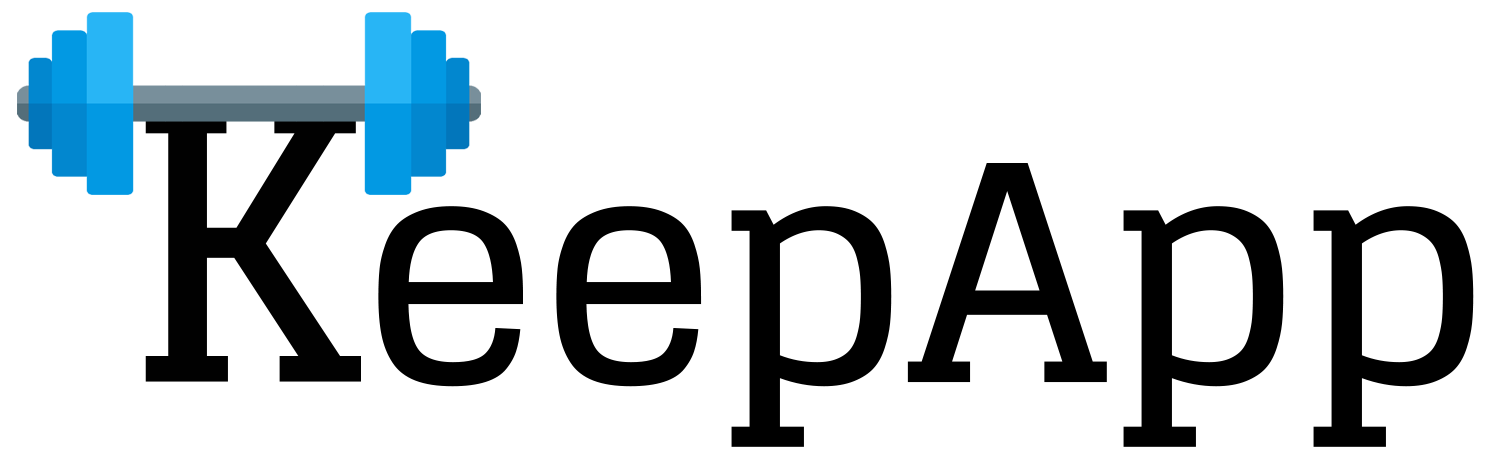
<style>
.page{position:relative;width:1489px;height:462px;background:#ffffff}
.page>*{position:absolute;margin:0}
.t1{font:375px "Glegoo-Bold";color:#010101}
.t2{font:300px "Glegoo-Bold";color:#000000}
</style>
<div class="page">
<p class="t1" style="left:145px;top:107px;width:216px;height:275px">K</p>
<p class="t2" style="left:378px;top:163px;width:1096px;height:284px">eepApp</p>
</div>
